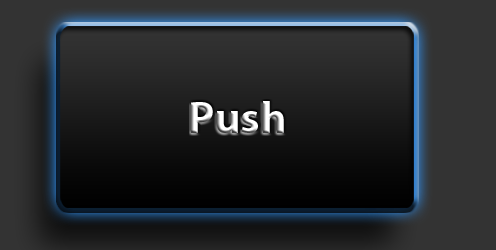
<style>
.page{position:relative;width:496px;height:250px}
.page>*{position:absolute;margin:0}
.t1{font:45px "MyriadPro-Bold"}
</style>
<div class="page">
<p class="t1" style="left:191px;top:101px;width:93px;height:32px">Push</p>
</div>
